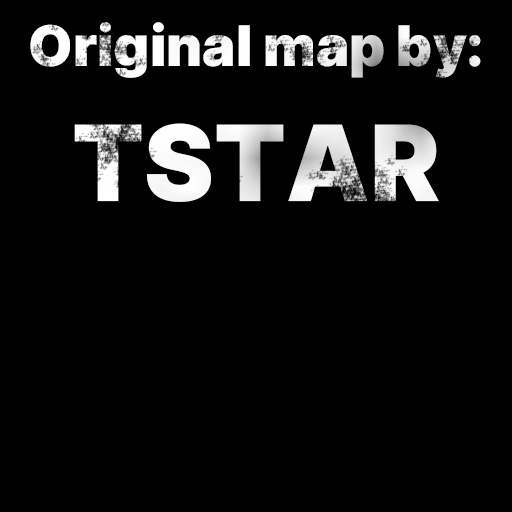
<style>
.page{position:relative;width:512px;height:512px;background:#000000}
.page>*{position:absolute;margin:0}
.t1{font:56px/135px "Inter-Black"}
.t2{font:105px/135px "Inter-Black"}
</style>
<div class="page">
<p class="t1" style="left:30px;top:22px;width:451px;height:180px;text-align:center">Original map by:<br><span class="t2">TSTAR</span></p>
</div>
